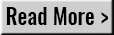
<style>
.page{position:relative;width:114px;height:35px;background:#cecece}
.page>*{position:absolute;margin:0}
.t1{font:21.8px "Oswald-Medium";color:#000000}
</style>
<div class="page">
<p class="t1" style="left:6px;top:7px;width:102px;height:18px">Read More &gt;</p>
</div>
